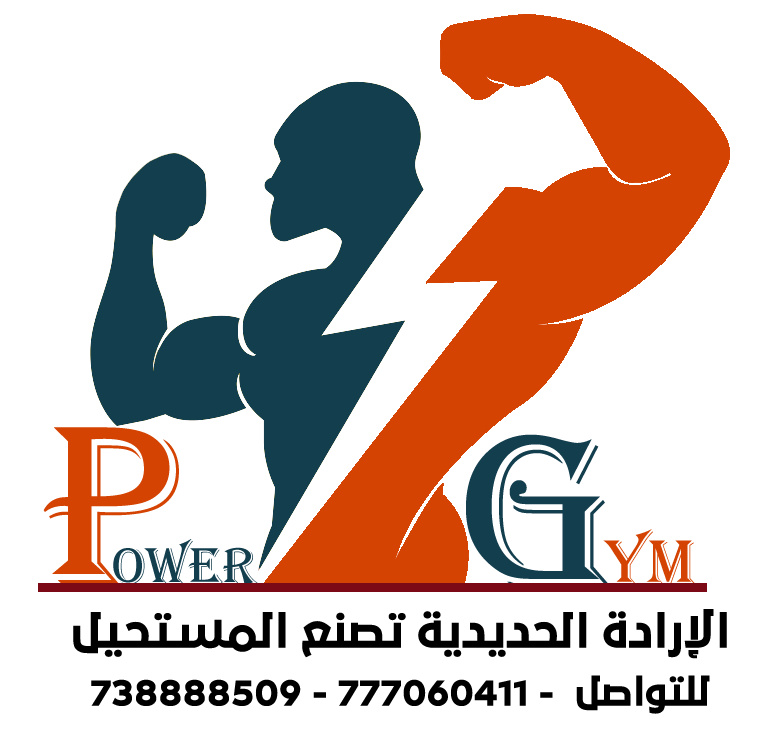
<style>
.page{position:relative;width:762px;height:732px;background:#ffffff}
.page>*{position:absolute;margin:0}
.t1{font:233.8px "Algerian";color:#d44302}
.t2{font:228.7px "Algerian";color:#133e4e}
.t3{font:66px "Algerian";color:#d44302}
.t4{font:54.1px "Algerian";color:#133e4e}
.t5{font:42.7px "29LTBukra-BoldItalic";color:#000000}
.t6{font:36px "29LTBukra-BoldItalic";color:#000000}
</style>
<div class="page">
<p class="t1" style="left:43px;top:427px;width:136px;height:157px">P</p>
<p class="t2" style="left:466px;top:434px;width:146px;height:155px">G</p>
<p class="t3" style="left:603px;top:529px;width:93px;height:56px">YM</p>
<p class="t4" style="left:113px;top:539px;width:145px;height:49px">OWER</p>
<p class="t5" style="left:73px;top:609px;width:654px;height:50px">الإرادة الحديدية تصنع المستحيل</p>
<p class="t6" style="left:91px;top:675px;width:619px;height:39px">للتواصل  - 777060411 - 738888509</p>
</div>
